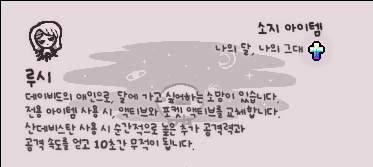
<style>
.page{position:relative;width:373px;height:167px;background:#e5d9de}
.page>*{position:absolute;margin:0}
.t1{font:12px "UhBeeSe_hyunBold";color:#372b2d}
.t2{font:12px "UhBeeSe_hyunBold";letter-spacing:-0.1em;color:#372b2d}
.t3{font:10px "UhBeeSe_hyunBold";color:#4c4442}
.t4{font:10px/15px "UhBeeSe_hyunBold";letter-spacing:-0.025em;color:#4c4442}
.t5{font:16px/23px "UhBeeSe_hyunBold";color:#372b2d}
.t6{font:10px/17px "UhBeeSe_hyunBold";letter-spacing:-0.025em;color:#4c4442}
.t7{font:10px/11px "UhBeeSe_hyunBold";letter-spacing:-0.025em;color:#4c4442}
.t8{font:10px/11px "UhBeeSe_hyun";letter-spacing:-0.025em;color:#4c4442}
.t9{font:10px/15px "UhBeeSe_hyun";letter-spacing:-0.025em;color:#4c4442}
.t10{font:16px/15px "Font_soulsV2_Body-Regular";letter-spacing:-0.025em;color:#4c4442}
</style>
<div class="page">
<p class="t1" style="left:258px;top:22px;width:65px;height:15px"><span class="t2">소</span>지 아이템</p>
<p class="t3" style="left:215px;top:42px;width:89px;height:14px">나의 달, 나의 그대</p>
<p class="t4" style="left:25px;top:68px;width:255px;height:84px"><span class="t5">루시<br></span>데이비드의 애인으로, 달에 가고 싶어하는 소망이 있습니다.<br><span class="t6">전용 아이템 사용 시, 액티브와 포켓 액티브를 교체합니다.<br></span><span class="t7">산데비스탄 사용 시 순간적으로 높은 추가 </span><span class="t8">공격력과<br></span><span class="t9">공격</span> 속도를 얻고 <span class="t10">10</span>초간 무적이 됩니다.</p>
</div>
